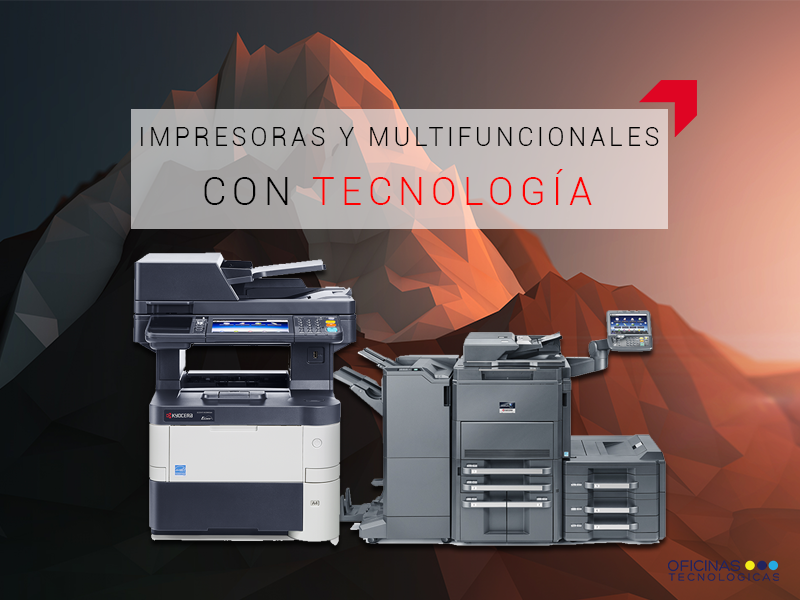
<style>
.page{position:relative;width:800px;height:600px}
.page>*{position:absolute;margin:0}
.t1{font:25.1px "Roboto-Light";letter-spacing:0.15em;color:#000000}
.t2{font:38.5px "Roboto-Light";letter-spacing:0.15em;color:#ff0000}
.t3{font:38.5px "Roboto-Light";letter-spacing:0.15em;color:#000000}
</style>
<div class="page">
<p class="t1" style="left:141px;top:127px;width:518px;height:19px">IMPRESORAS Y MULTIFUNCIONALES</p>
<p class="t2" style="left:204px;top:169px;width:388px;height:36px"><span class="t3">CON </span>TECNOLOGÍA</p>
</div>
